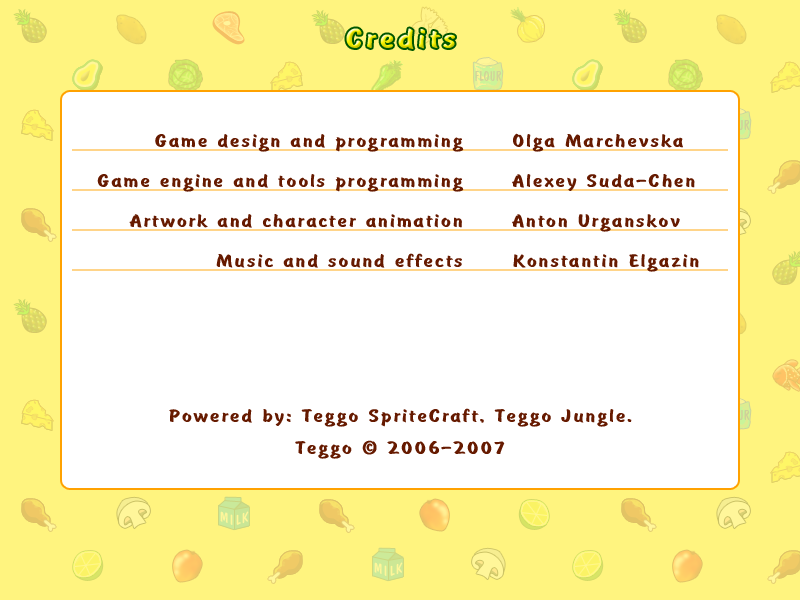
<style>
.page{position:relative;width:800px;height:600px;background:#ffffff}
.page>*{position:absolute;margin:0}
.t1{font:30px "BrushType-Bold";letter-spacing:0.1em;scale:1.32 1}
.t2{font:20px/40px "BrushType-Bold";letter-spacing:0.075em;color:#661a00;scale:1.32 1}
.t3{font:20px "BrushType-Bold";letter-spacing:0.075em;color:#661a00;scale:1.32 1}
</style>
<div class="page">
<p class="t1" style="left:346px;top:28px;width:109px;height:21px">Credits</p>
<p class="t2" style="left:97px;top:134px;width:367px;height:134px;text-align:right">Game design and programming<br>Game engine and tools programming<br>Artwork and character animation<br>Music and sound effects</p>
<p class="t2" style="left:512px;top:133px;width:187px;height:139px">Olga Marchevska<br>Alexey Suda-Chen<br>Anton Urganskov<br>Konstantin Elgazin</p>
<p class="t3" style="left:169px;top:408px;width:463px;height:19px">Powered by: Teggo SpriteCraft, Teggo Jungle.</p>
<p class="t3" style="left:295px;top:440px;width:210px;height:19px">Teggo © 2006-2007</p>
</div>
